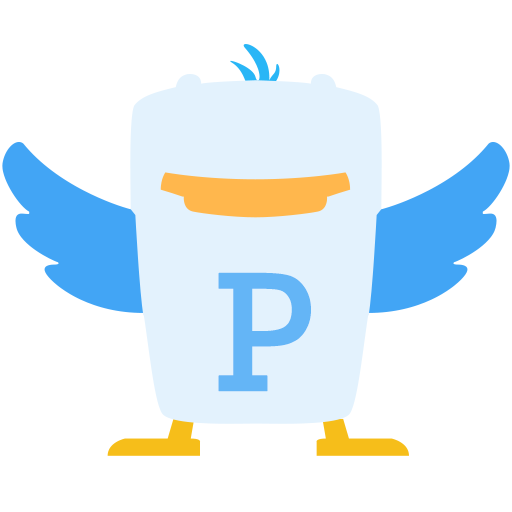
<style>
.page{position:relative;width:512px;height:512px;background:#ffffff}
.page>*{position:absolute;margin:0}
.t1{font:172.8px "Rockwell";letter-spacing:0.04em;color:#64b5f6;font-weight:bold}
</style>
<div class="page">
<p class="t1" style="left:218px;top:272px;width:93px;height:120px">P</p>
</div>
